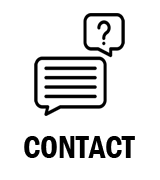
<style>
.page{position:relative;width:160px;height:180px;background:#ffffff}
.page>*{position:absolute;margin:0}
.t1{font:32px "FranklinGothic-DemiCond";color:#000000}
</style>
<div class="page">
<p class="t1" style="left:24px;top:136px;width:111px;height:22px">CONTACT</p>
</div>
